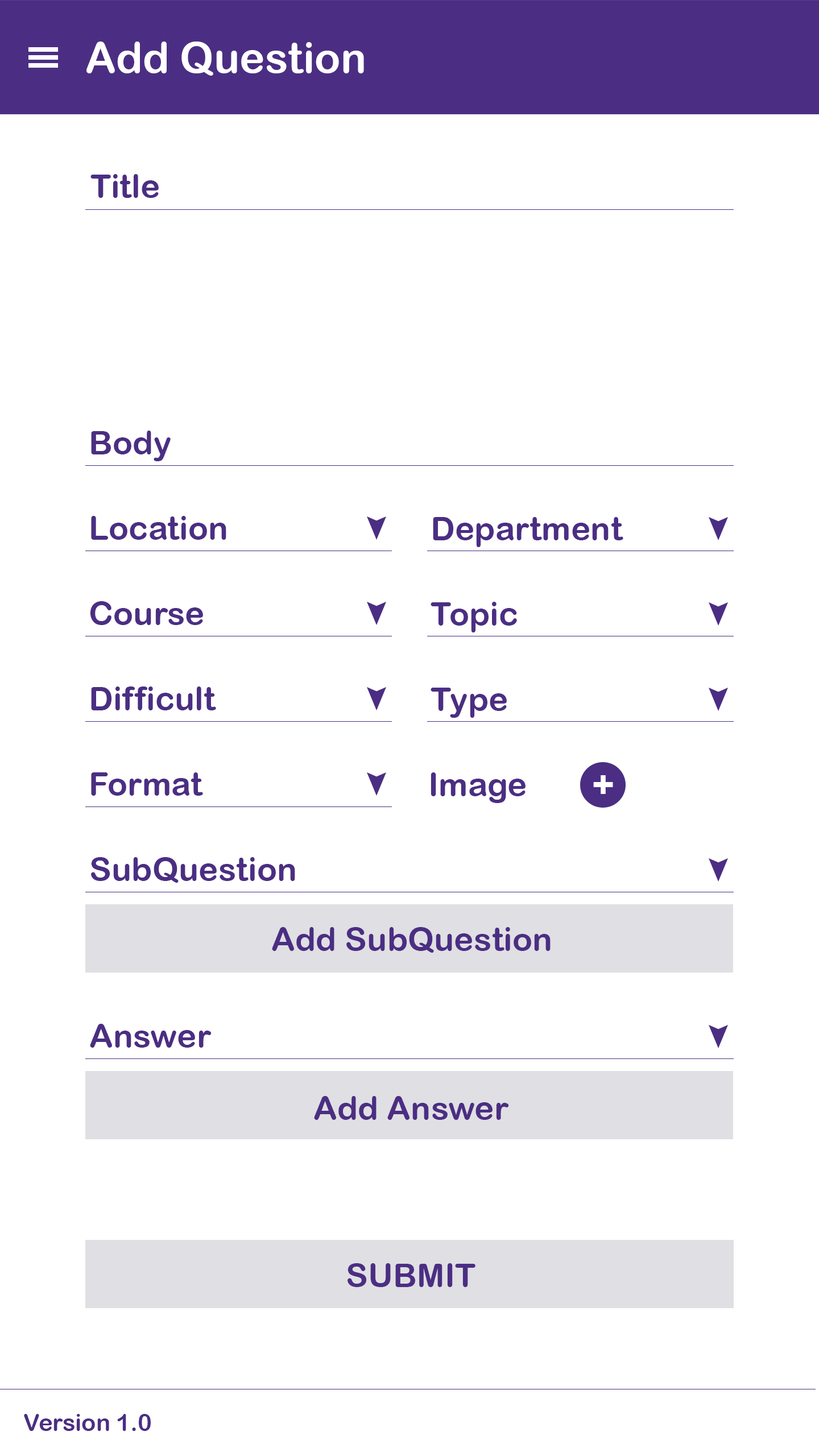
<style>
.page{position:relative;width:819px;height:1456px;background:#ffffff}
.page>*{position:absolute;margin:0}
.t1{font:42.7px "ArialRoundedMTBold";color:#ffffff}
.t2{font:33.2px "ArialRoundedMTBold";color:#4b2e83}
.t3{font:37.9px "ArialRoundedMTBold";color:#ffffff}
.t4{font:23.7px "ArialRoundedMTBold";color:#4b2e83}
</style>
<div class="page">
<p class="t1" style="left:86px;top:42px;width:278px;height:34px">Add Question</p>
<p class="t2" style="left:90px;top:174px;width:69px;height:24px">Title</p>
<p class="t2" style="left:91px;top:431px;width:80px;height:30px">Body</p>
<p class="t2" style="left:91px;top:516px;width:135px;height:24px">Location</p>
<p class="t2" style="left:433px;top:517px;width:190px;height:30px">Department</p>
<p class="t2" style="left:90px;top:601px;width:113px;height:24px">Course</p>
<p class="t2" style="left:431px;top:602px;width:86px;height:30px">Topic</p>
<p class="t2" style="left:91px;top:686px;width:125px;height:24px">Difficult</p>
<p class="t2" style="left:431px;top:688px;width:76px;height:30px">Type</p>
<p class="t2" style="left:91px;top:772px;width:112px;height:24px">Format</p>
<p class="t2" style="left:431px;top:772px;width:95px;height:31px">Image</p>
<p class="t3" style="left:593px;top:775px;width:20px;height:19px">+</p>
<p class="t2" style="left:91px;top:857px;width:204px;height:26px">SubQuestion</p>
<p class="t2" style="left:272px;top:927px;width:279px;height:26px">Add SubQuestion</p>
<p class="t2" style="left:90px;top:1024px;width:122px;height:24px">Answer</p>
<p class="t2" style="left:314px;top:1096px;width:195px;height:24px">Add Answer</p>
<p class="t2" style="left:348px;top:1263px;width:127px;height:24px">SUBMIT</p>
<p class="t4" style="left:24px;top:1414px;width:127px;height:17px">Version 1.0</p>
</div>
